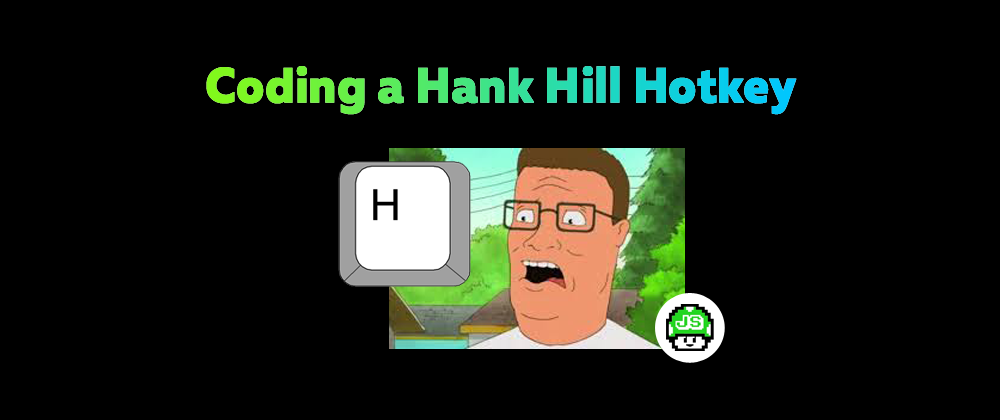
<style>
.page{position:relative;width:1000px;height:420px;background:#000000}
.page>*{position:absolute;margin:0}
.t1{font:49px "MullerExtraBoldDEMO";font-weight:bold;scale:0.94 1}
</style>
<div class="page">
<p class="t1" style="left:206px;top:66px;width:591px;height:49px">Coding a Hank Hill Hotkey</p>
</div>
